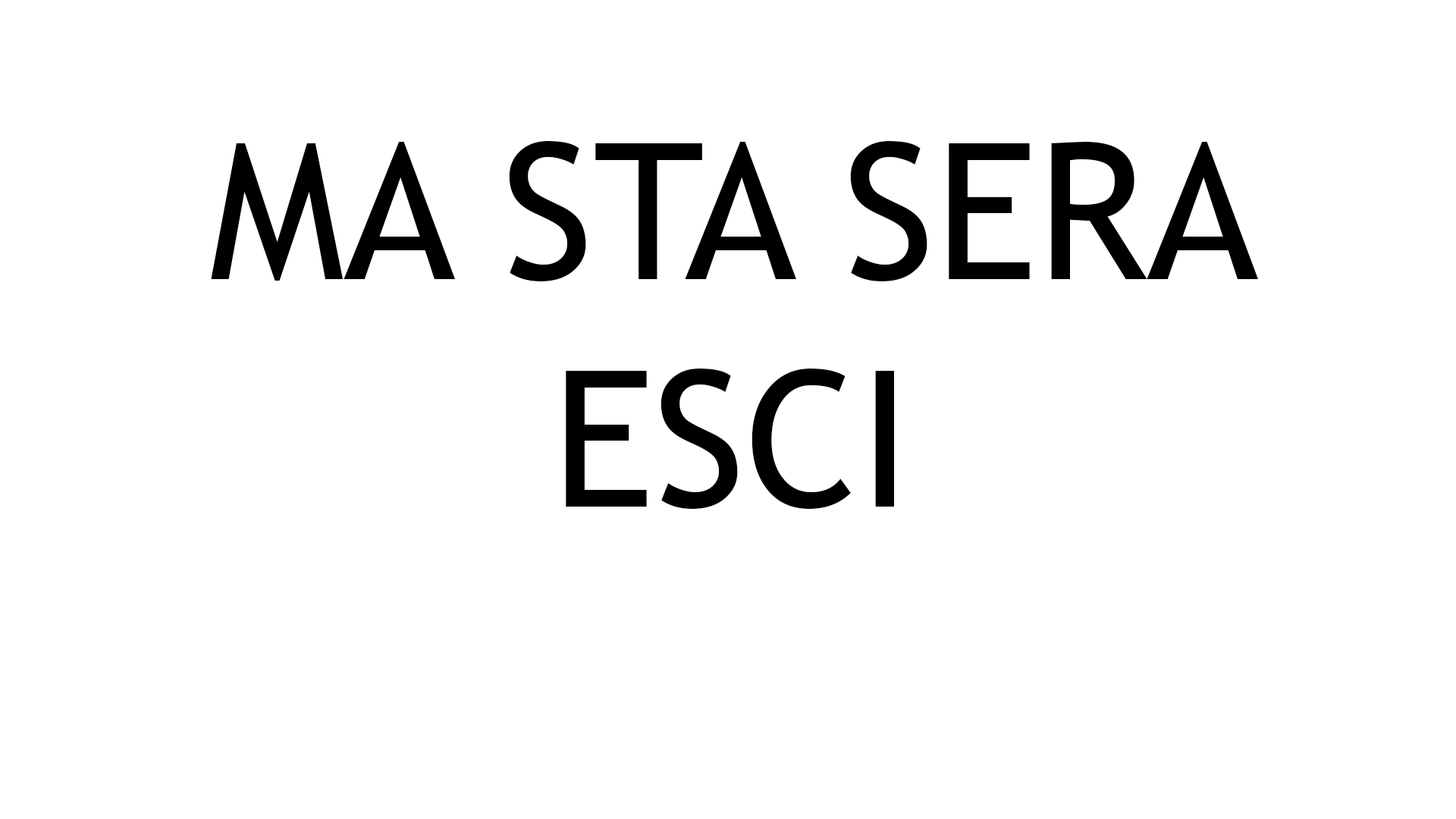
<style>
.page{position:relative;width:1456px;height:819px;background:#ffffff}
.page>*{position:absolute;margin:0}
.t1{font:189.6px "TrebuchetMS";color:#000000}
</style>
<div class="page">
<p class="t1" style="left:211px;top:141px;width:1047px;height:368px">MA STA SERA <br>      ESCI</p>
</div>
